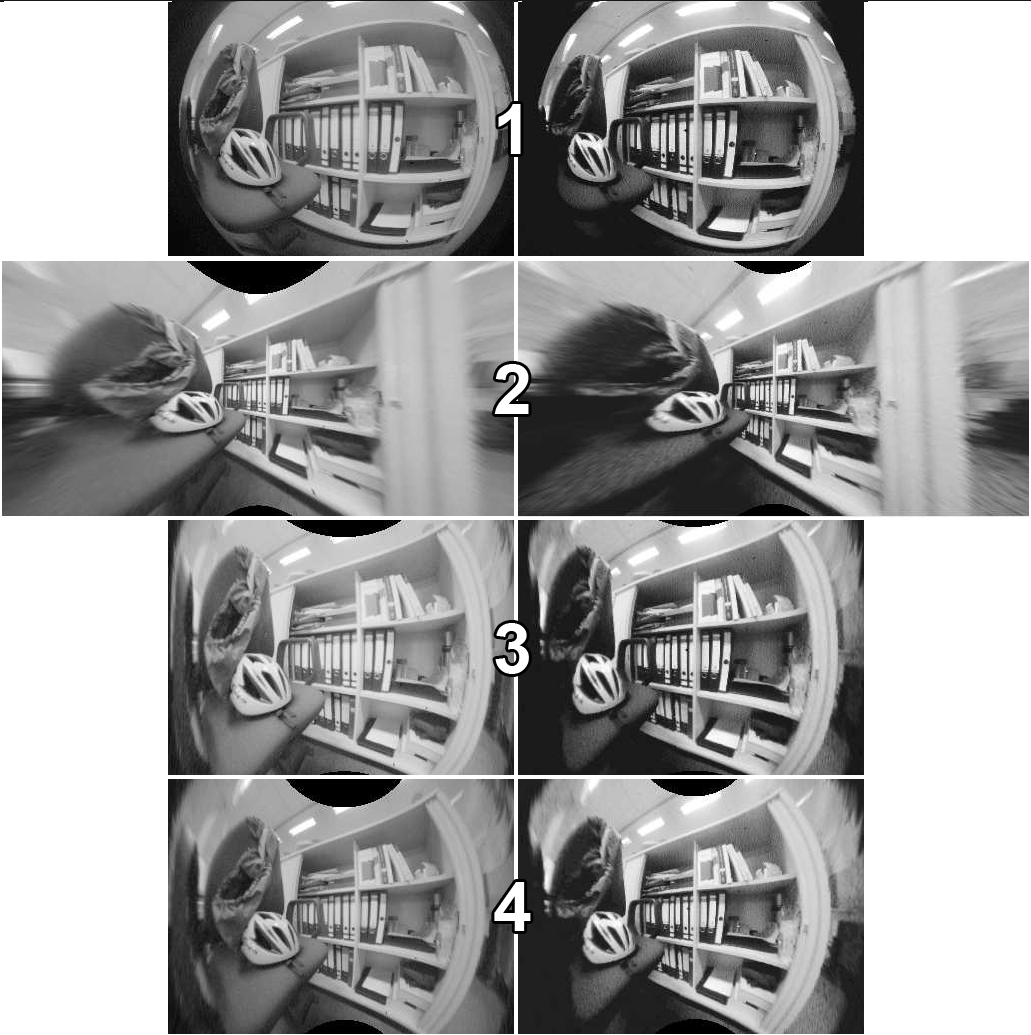
<style>
.page{position:relative;width:1031px;height:1035px;background:#ffffff}
.page>*{position:absolute;margin:0}
.t1{font:70px "Arial-BoldMT";color:#ffffff}
</style>
<div class="page">
<p class="t1" style="left:498px;top:103px;width:23px;height:50px">1</p>
<p class="t1" style="left:494px;top:363px;width:35px;height:50px">2</p>
<p class="t1" style="left:495px;top:622px;width:34px;height:51px">3</p>
<p class="t1" style="left:494px;top:881px;width:37px;height:49px">4</p>
</div>
